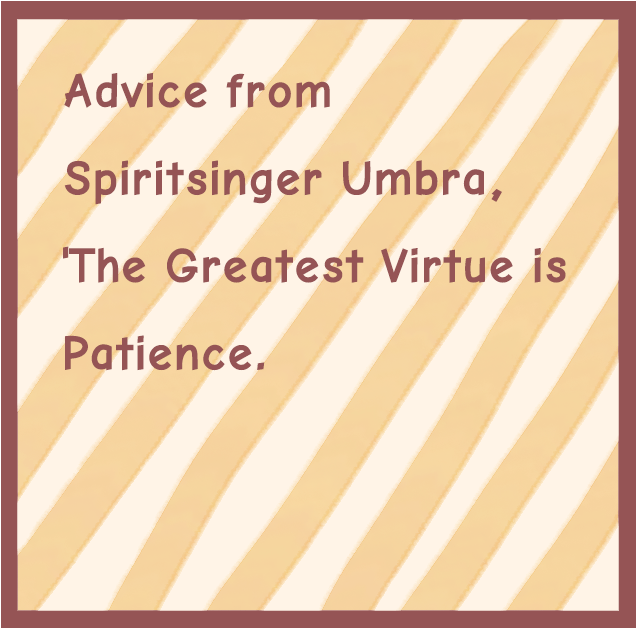
<style>
.page{position:relative;width:636px;height:628px;background:#fff4e7}
.page>*{position:absolute;margin:0}
.t1{font:50px "ComicNeueAngular-Bold";color:#955455}
</style>
<div class="page">
<p class="t1" style="left:63px;top:73px;width:503px;height:298px">Advice from Spiritsinger Umbra, 'The Greatest Virtue is Patience.</p>
</div>
